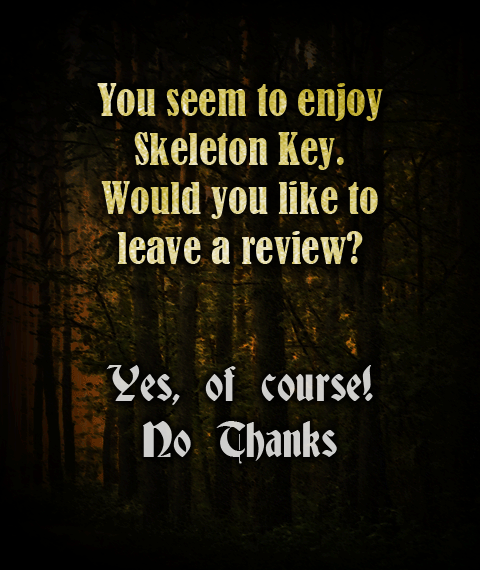
<style>
.page{position:relative;width:480px;height:570px}
.page>*{position:absolute;margin:0}
.t1{font:41px "BernardMT-Condensed"}
.t2{font:46px/56px "Deutsch-Gothic";color:#cfcecd}
</style>
<div class="page">
<p class="t1" style="left:97px;top:83px;width:286px;height:181px;text-align:center">You seem to enjoy<br>Skeleton Key.<br>Would you like to<br>leave a review?</p>
<p class="t2" style="left:106px;top:365px;width:267px;height:99px;text-align:center">Yes, of course!<br>No Thanks</p>
</div>
